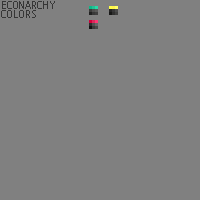
<style>
.page{position:relative;width:200px;height:200px;background:#808080}
.page>*{position:absolute;margin:0}
.t1{font:10px "Monaco";color:#363636;text-transform:uppercase}
</style>
<div class="page">
<p class="t1" style="left:2px;top:1px;width:53px;height:8px">ECONARCHY</p>
<p class="t1" style="left:1px;top:10px;width:35px;height:8px">colors</p>
</div>
